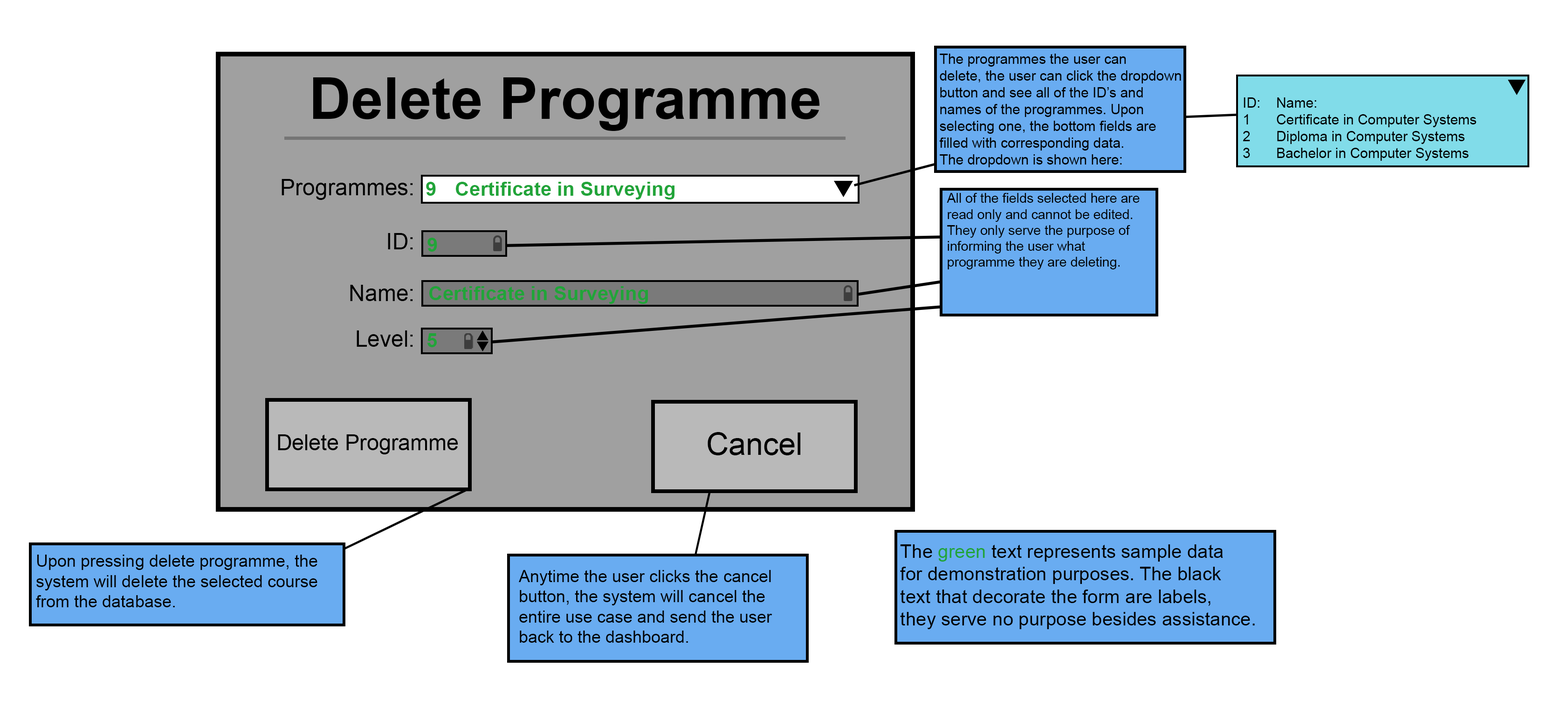
<style>
.page{position:relative;width:1568px;height:707px;background:#ffffff}
.page>*{position:absolute;margin:0}
.t1{font:14px "ArialMT";color:#000000}
.t2{font:58px "Arial-BoldMT";color:#000000}
.t3{font:22.4px "ArialMT";color:#000000}
.t4{font:19.7px "Arial-BoldMT";color:#21a439}
.t5{font:13.3px "ArialMT";color:#000000}
.t6{font:21.7px "ArialMT";color:#000000}
.t7{font:31.1px "ArialMT";color:#000000}
.t8{font:18.8px "ArialMT";color:#000000}
.t9{font:18.8px "ArialMT";color:#21a439}
.t10{font:16.8px "ArialMT";color:#000000}
</style>
<div class="page">
<p class="t1" style="left:939px;top:54px;width:242px;height:113px">The programmes the user can<br>delete, the user can click the dropdown<br>button and see all of the ID’s and<br>names of the programmes. Upon<br>selecting one, the bottom fields are<br>filled with corresponding data.<br>The dropdown is shown here:</p>
<p class="t2" style="left:313px;top:77px;width:506px;height:54px">Delete Programme</p>
<p class="t1" style="left:1243px;top:97px;width:233px;height:64px">ID: Name:<br>1  Certificate in Computer Systems<br>2  Diploma in Computer Systems<br>3  Bachelor in Computer Systems</p>
<p class="t3" style="left:282px;top:179px;width:131px;height:21px">Programmes:</p>
<p class="t4" style="left:426px;top:182px;width:248px;height:17px">9  Certificate in Surveying</p>
<p class="t5" style="left:947px;top:193px;width:193px;height:76px">All of the fields selected here are<br>read only and cannot be edited.<br>They only serve the purpose of<br>informing the user what<br>programme they are deleting.</p>
<p class="t3" style="left:388px;top:233px;width:25px;height:16px">ID:</p>
<p class="t4" style="left:427px;top:238px;width:10px;height:14px">9</p>
<p class="t3" style="left:350px;top:285px;width:63px;height:16px">Name:</p>
<p class="t4" style="left:429px;top:286px;width:219px;height:18px">Certificate in Surveying</p>
<p class="t3" style="left:357px;top:330px;width:56px;height:17px">Level:</p>
<p class="t4" style="left:427px;top:333px;width:10px;height:14px">5</p>
<p class="t6" style="left:278px;top:434px;width:180px;height:20px">Delete Programme</p>
<p class="t7" style="left:708px;top:432px;width:93px;height:23px">Cancel</p>
<p class="t8" style="left:900px;top:544px;width:355px;height:85px">The <span class="t9">green </span>text represents sample data<br>for demonstration purposes. The black<br>text that decorate the form are labels,<br>they serve no purpose besides assistance.</p>
<p class="t10" style="left:36px;top:555px;width:281px;height:52px">Upon pressing delete programme, the <br>system will delete the selected course <br>from the database.</p>
<p class="t10" style="left:519px;top:570px;width:253px;height:73px">Anytime the user clicks the cancel<br>button, the system will cancel the<br>entire use case and send the user <br>back to the dashboard.</p>
</div>
